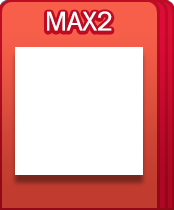
<style>
.page{position:relative;width:174px;height:210px;background:#ffffff}
.page>*{position:absolute;margin:0}
.t1{font:25px "ITCAvantGardeStd-BkCn";color:#ffffff;scale:1.25 1}
</style>
<div class="page">
<p class="t1" style="left:47px;top:11px;width:65px;height:20px">MAX2</p>
</div>
